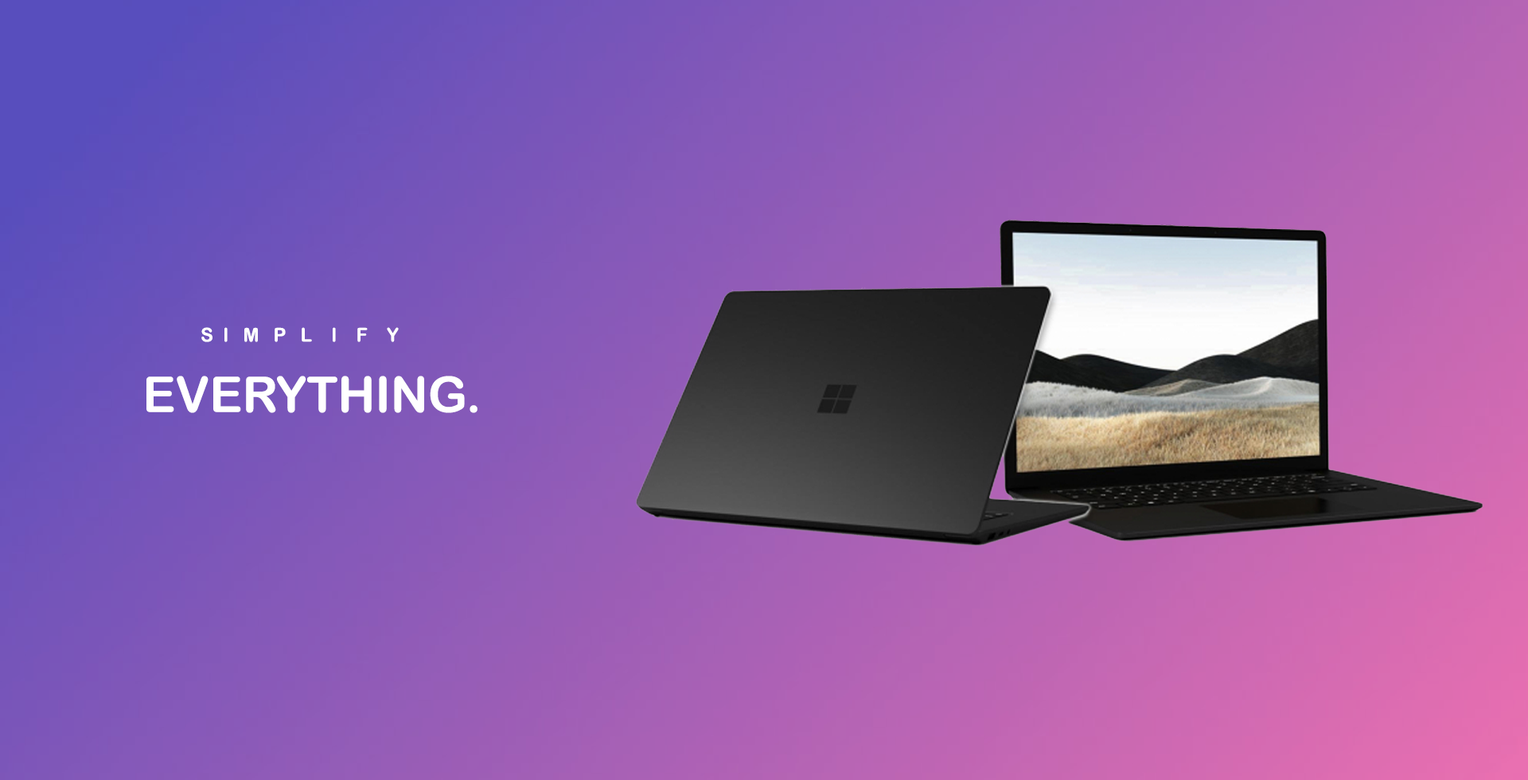
<style>
.page{position:relative;width:1528px;height:780px}
.page>*{position:absolute;margin:0}
.t1{font:19.1px "ArialRoundedMTBold";color:#ffffff}
.t2{font:49.4px "ArialRoundedMTBold";color:#ffffff}
</style>
<div class="page">
<p class="t1" style="left:201px;top:327px;width:198px;height:15px">S  I   M   P   L    I    F    Y</p>
<p class="t2" style="left:146px;top:376px;width:332px;height:37px">EVERYTHING.</p>
</div>
